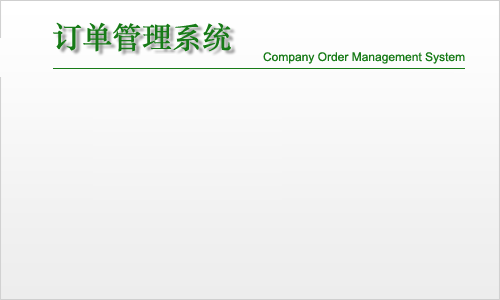
<style>
.page{position:relative;width:500px;height:300px}
.page>*{position:absolute;margin:0}
.t1{font:30px "STZhongsong";color:#177b17}
.t2{font:12px "ArialMT";color:#177b17}
</style>
<div class="page">
<p class="t1" style="left:53px;top:22px;width:178px;height:30px">订单管理系统</p>
<p class="t2" style="left:263px;top:52px;width:202px;height:12px">Company Order Management System</p>
</div>
